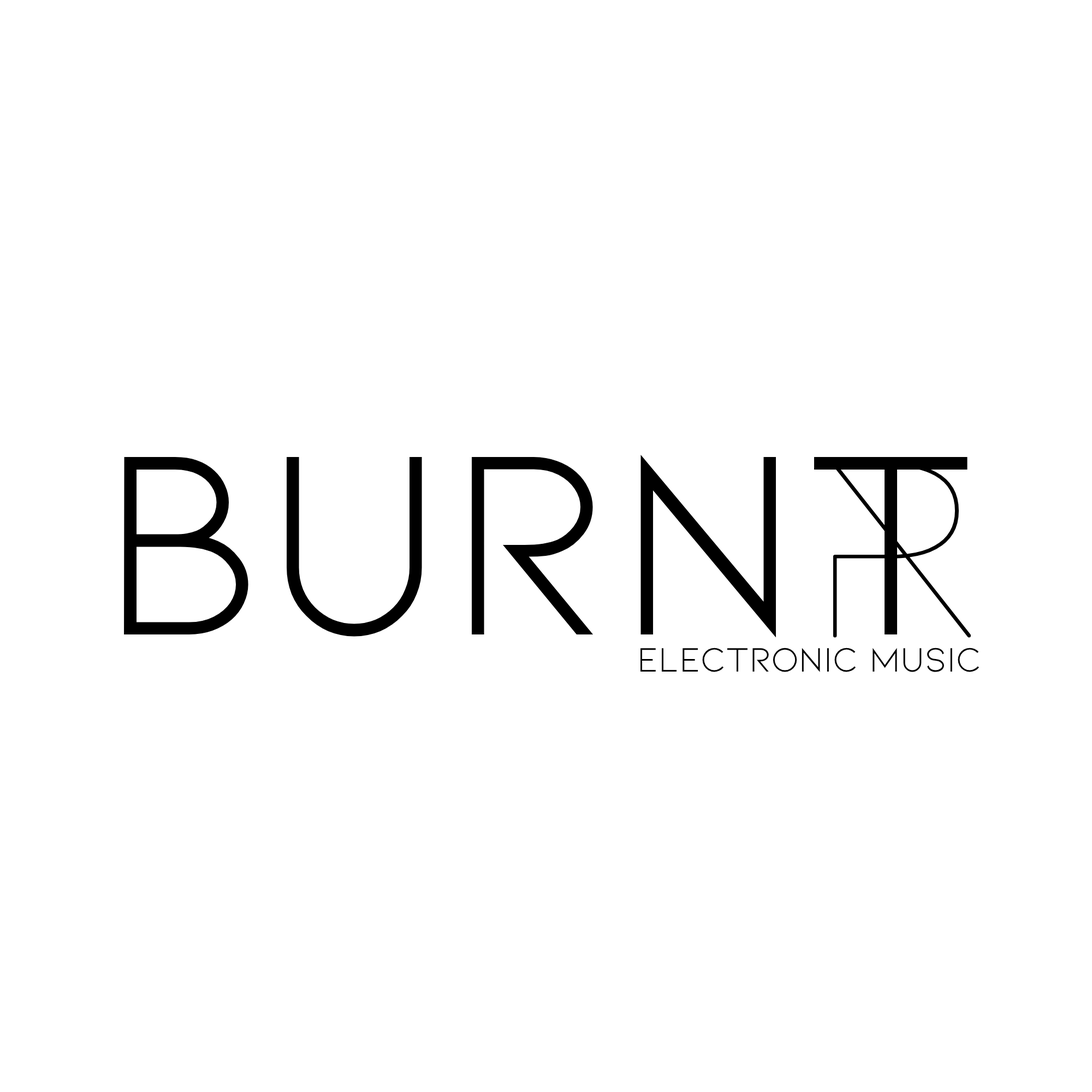
<style>
.page{position:relative;width:1092px;height:1092px;background:#ffffff}
.page>*{position:absolute;margin:0}
.t1{font:273px "Kiona-Regular";color:#000000}
.t2{font:273px "ROCKETWILDNESS";color:#000000}
.t3{font:36px "Kiona-Regular";color:#000000}
</style>
<div class="page">
<p class="t1" style="left:124px;top:454px;width:843px;height:184px">BURNT</p>
<p class="t2" style="left:833px;top:463px;width:138px;height:175px">R</p>
<p class="t3" style="left:640px;top:648px;width:340px;height:24px">electronic music</p>
</div>
